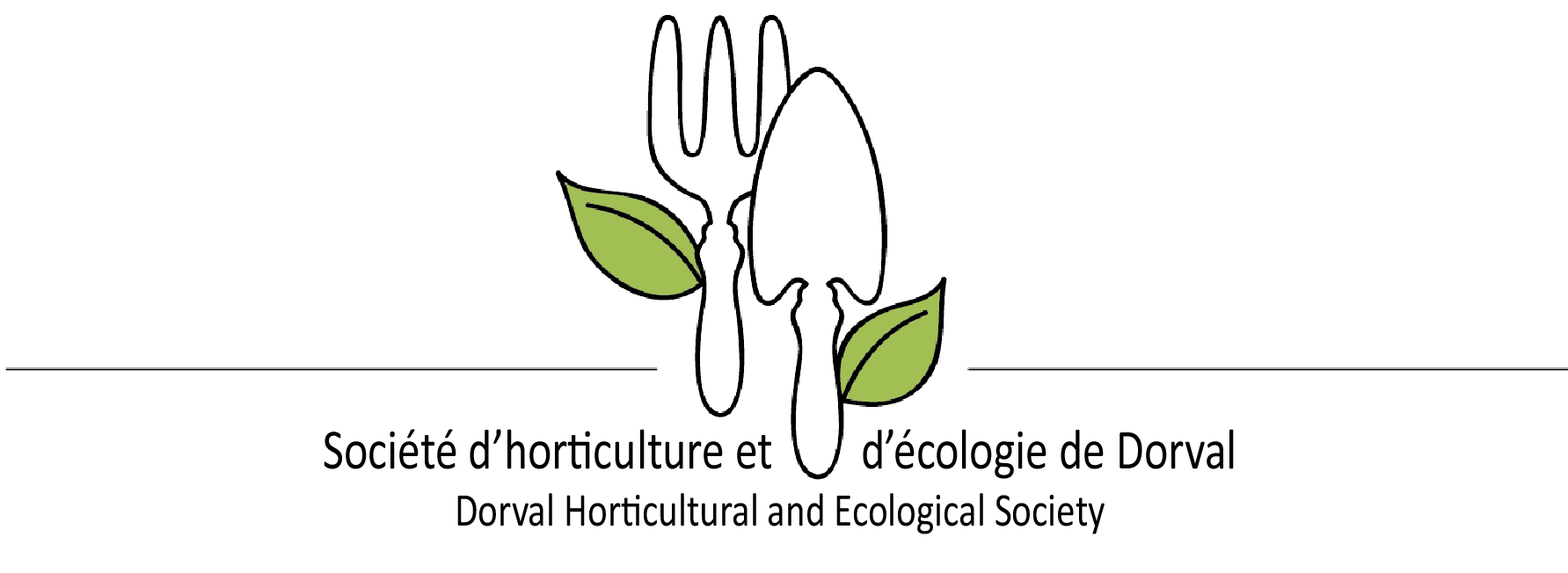
<style>
.page{position:relative;width:1568px;height:573px;background:#ffffff}
.page>*{position:absolute;margin:0}
.t1{font:57.2px "Calibri";color:#000000;scale:0.8 1}
.t2{font:47.5px "Calibri";color:#000000;scale:0.8 1}
</style>
<div class="page">
<p class="t1" style="left:324px;top:429px;width:910px;height:106px;text-align:center">Société d’horticulture et    d’écologie de Dorval<br><span class="t2">Dorval Horticultural and Ecological Society</span></p>
</div>
